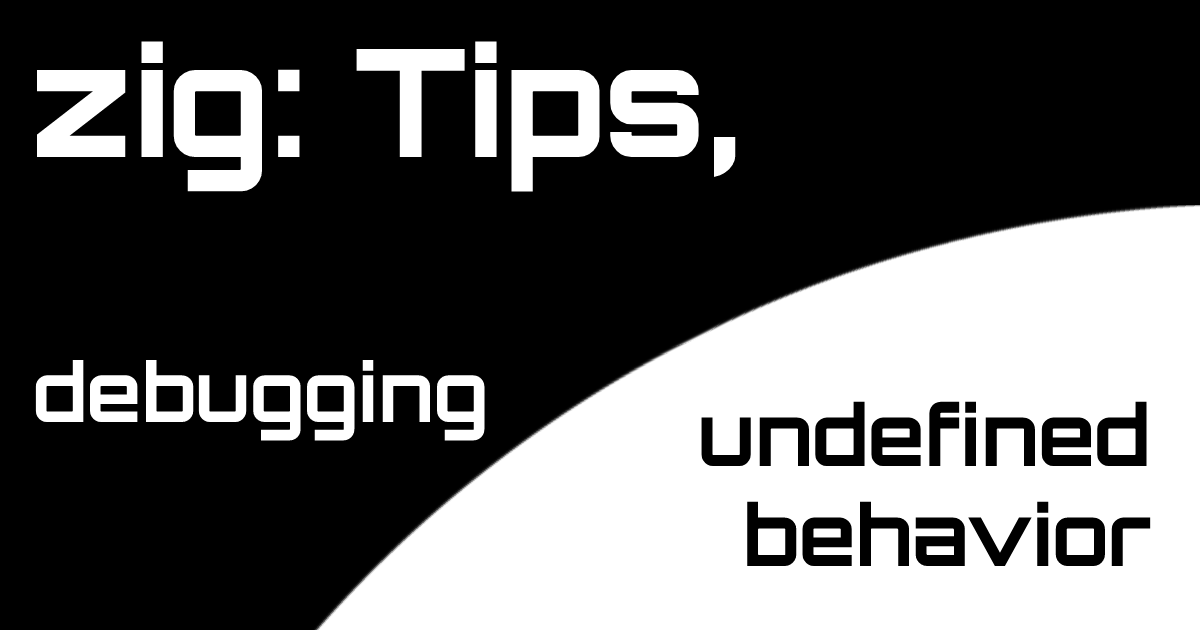
<style>
.page{position:relative;width:1200px;height:630px;background:#000000}
.page>*{position:absolute;margin:0}
.t1{font:150px "Orbitron-ExtraBold";color:#ffffff}
.t2{font:80.4px "Orbitron-Bold";color:#ffffff}
.t3{font:83.4px "Orbitron-Bold";color:#000000}
</style>
<div class="page">
<p class="t1" style="left:37px;top:41px;width:699px;height:151px">zig: Tips,</p>
<p class="t2" style="left:35px;top:360px;width:450px;height:81px">debugging</p>
<p class="t3" style="left:701px;top:401px;width:450px;height:165px;text-align:right">undefined<br>behavior</p>
</div>
